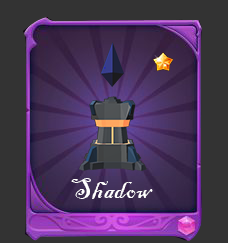
<style>
.page{position:relative;width:228px;height:243px;background:#333333}
.page>*{position:absolute;margin:0}
.t1{font:30px "BlackadderITC-Regular";color:#ffffff}
</style>
<div class="page">
<p class="t1" style="left:71px;top:178px;width:82px;height:21px">Shadow</p>
</div>
